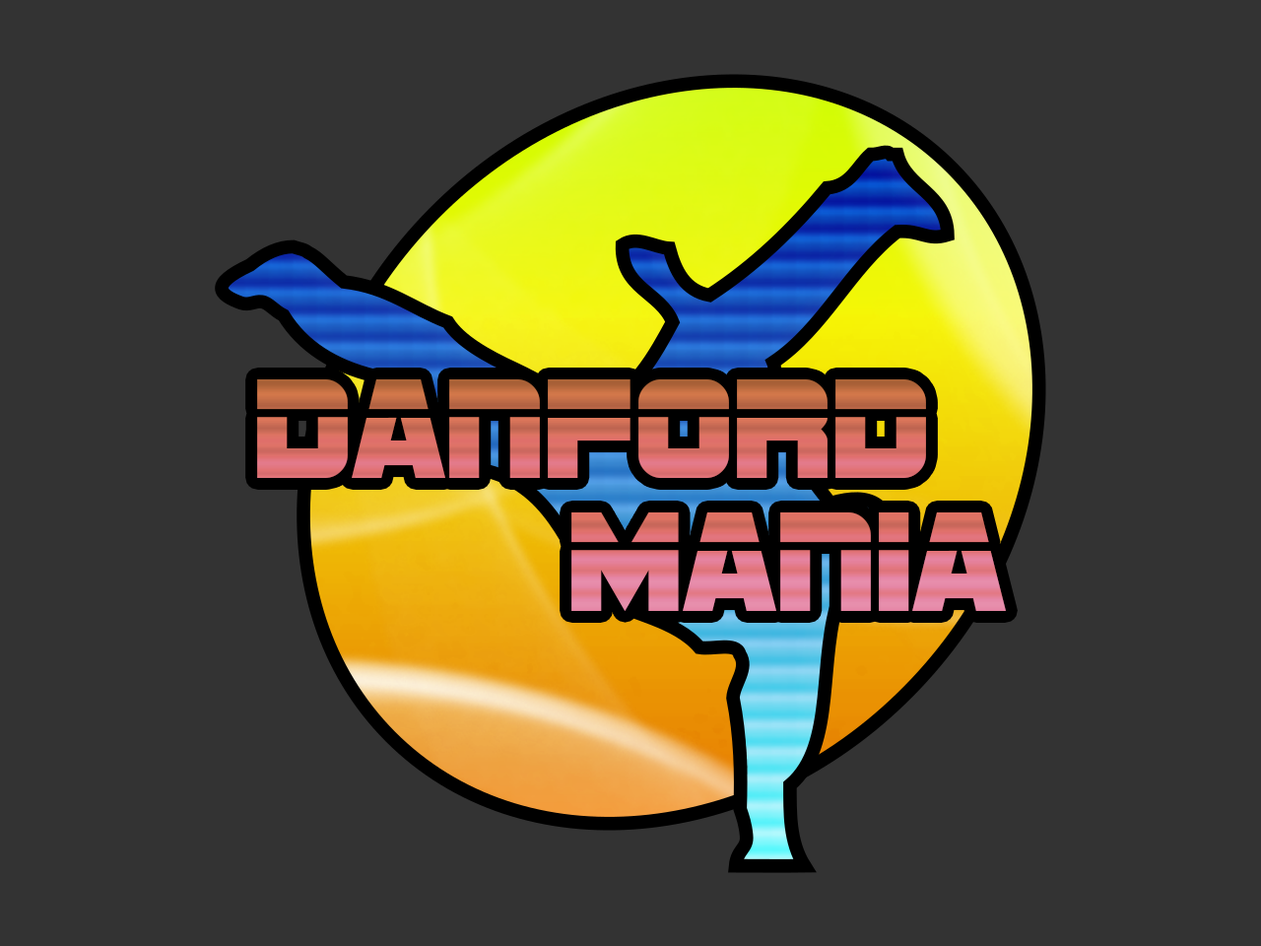
<style>
.page{position:relative;width:1261px;height:946px;background:#333333}
.page>*{position:absolute;margin:0}
.t1{font:147.8px "SFSportsNightUpright"}
</style>
<div class="page">
<p class="t1" style="left:257px;top:379px;width:669px;height:99px">Danford</p>
<p class="t1" style="left:571px;top:512px;width:435px;height:99px">Mania</p>
</div>
